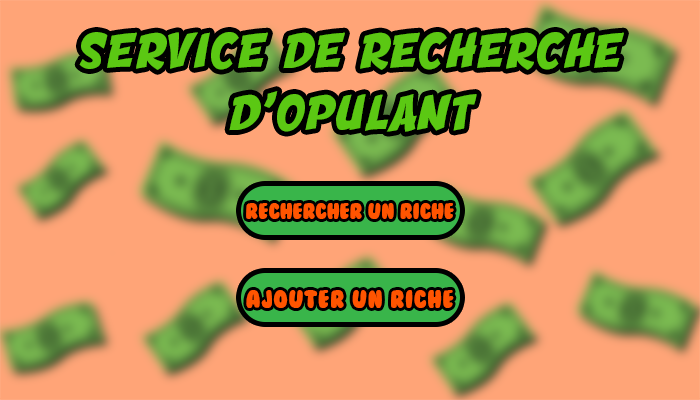
<style>
.page{position:relative;width:700px;height:400px;background:#ffa477}
.page>*{position:absolute;margin:0}
.t1{font:51.4px "Engcomica";letter-spacing:0.03em;color:#5bc813}
.t2{font:20.6px "BubbleGum";color:#ff5400}
.t3{font:23.1px "BubbleGum";letter-spacing:0.03em;color:#ff5400}
</style>
<div class="page">
<p class="t1" style="left:79px;top:32px;width:545px;height:100px;text-align:center">SERVICE DE RECHERCHE<br>D'OPULANT</p>
<p class="t2" style="left:246px;top:203px;width:208px;height:16px">Rechercher un riche</p>
<p class="t3" style="left:246px;top:290px;width:208px;height:18px">Ajouter un riche</p>
</div>
